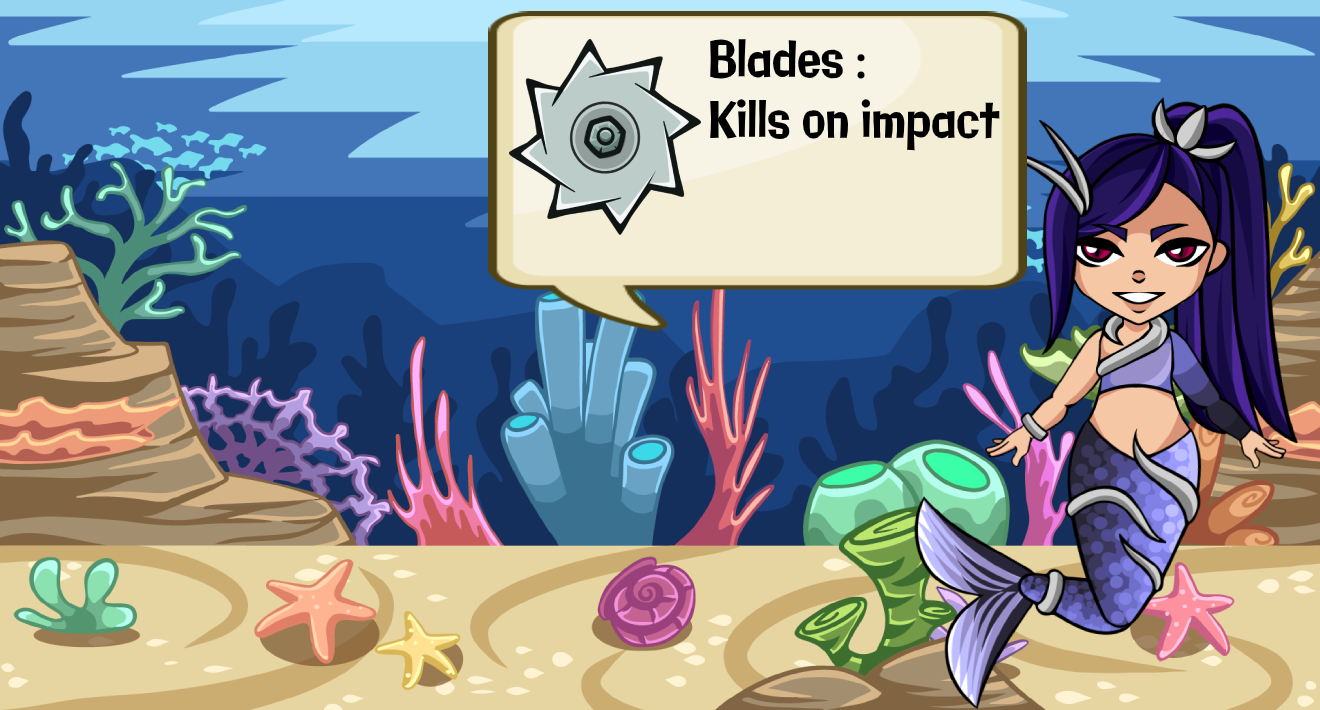
<style>
.page{position:relative;width:1320px;height:710px}
.page>*{position:absolute;margin:0}
.t1{font:50.5px "Galindo-Regular";color:#000000;scale:0.77 1}
</style>
<div class="page">
<p class="t1" style="left:710px;top:39px;width:290px;height:112px">Blades : <br>Kills on impact</p>
</div>
